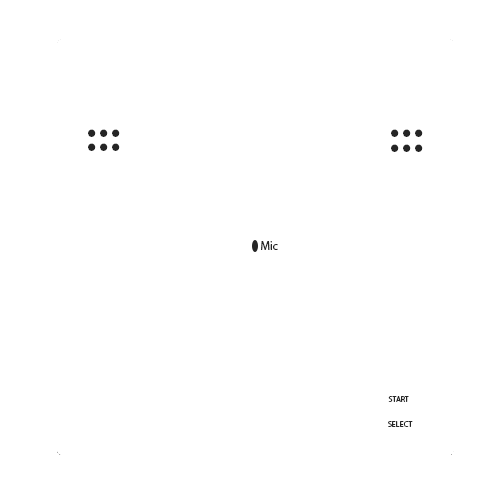
<style>
.page{position:relative;width:500px;height:500px;background:#ffffff}
.page>*{position:absolute;margin:0}
.t1{font:60px "MyriadPro-Regular";color:#252525}
.t2{font:12px "MyriadPro-Regular";color:#252525}
.t3{font:8px "MyriadPro-Regular";color:#252525}
</style>
<div class="page">
<p class="t1" style="left:88px;top:129px;width:32px;height:8px">...</p>
<p class="t1" style="left:391px;top:129px;width:32px;height:8px">...</p>
<p class="t1" style="left:88px;top:143px;width:32px;height:8px">...</p>
<p class="t1" style="left:391px;top:144px;width:32px;height:8px">...</p>
<p class="t2" style="left:261px;top:241px;width:17px;height:9px">Mic</p>
<p class="t3" style="left:388px;top:396px;width:21px;height:6px">START</p>
<p class="t3" style="left:388px;top:421px;width:25px;height:6px">SELECT</p>
</div>
